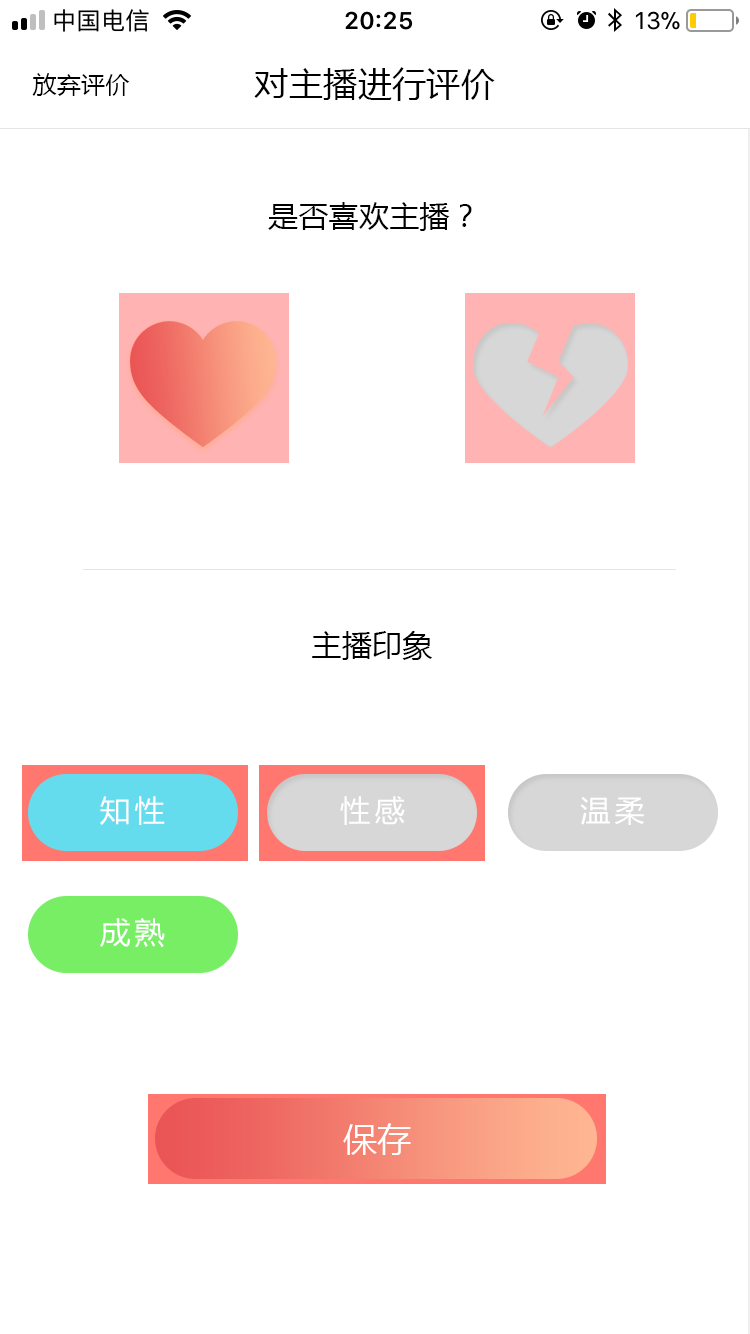
<style>
.page{position:relative;width:750px;height:1334px;background:#ffffff}
.page>*{position:absolute;margin:0}
.t1{font:24px "MicrosoftYaHei";letter-spacing:0.01em;color:#000000}
.t2{font:34px "MicrosoftYaHei";letter-spacing:0.01em;color:#000000}
.t3{font:30px "MicrosoftYaHei";letter-spacing:0.01em;color:#000000}
.t4{font:29.7px "MicrosoftYaHei";letter-spacing:0.13em;color:#ffffff}
.t5{font:34px "MicrosoftYaHei";letter-spacing:0.01em;color:#ffffff}
</style>
<div class="page">
<p class="t1" style="left:32px;top:73px;width:98px;height:23px">放弃评价</p>
<p class="t2" style="left:254px;top:67px;width:241px;height:34px">对主播进行评价</p>
<p class="t3" style="left:268px;top:202px;width:204px;height:29px">是否喜欢主播？</p>
<p class="t3" style="left:312px;top:631px;width:120px;height:29px">主播印象</p>
<p class="t4" style="left:100px;top:796px;width:65px;height:29px">知性</p>
<p class="t4" style="left:340px;top:796px;width:65px;height:29px">性感</p>
<p class="t4" style="left:580px;top:796px;width:64px;height:29px">温柔</p>
<p class="t4" style="left:100px;top:918px;width:65px;height:30px">成熟</p>
<p class="t5" style="left:343px;top:1123px;width:68px;height:32px">保存</p>
</div>
